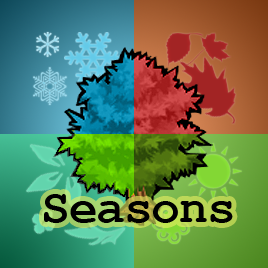
<style>
.page{position:relative;width:268px;height:268px}
.page>*{position:absolute;margin:0}
.t1{font:48px "CourierNewPS-BoldMT";letter-spacing:-0.025em;color:#000000}
</style>
<div class="page">
<p class="t1" style="left:44px;top:194px;width:189px;height:29px">Seasons</p>
</div>
